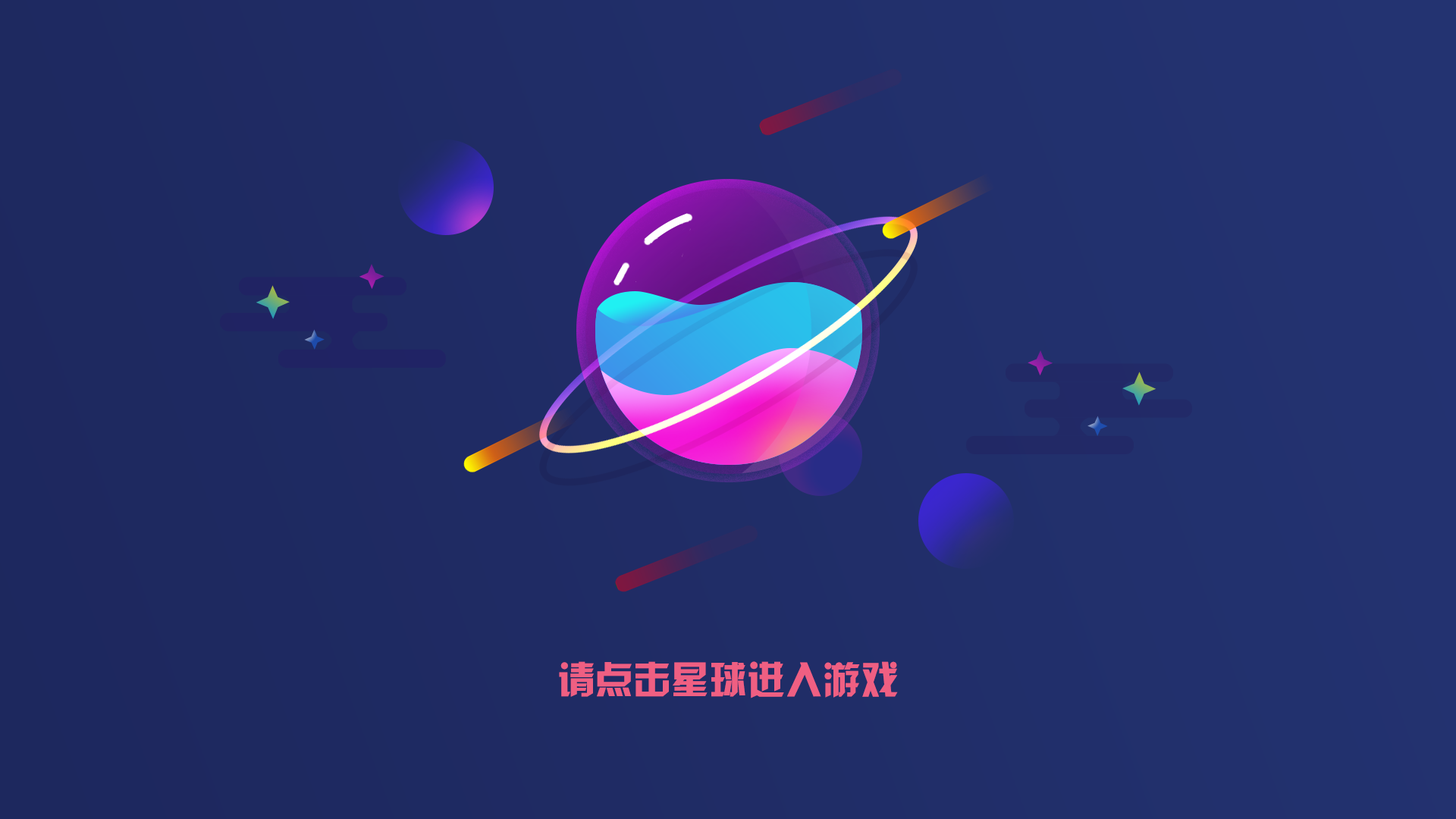
<style>
.page{position:relative;width:1456px;height:819px}
.page>*{position:absolute;margin:0}
.t1{font:37.9px "HYk2gj";color:#ef5f82}
</style>
<div class="page">
<p class="t1" style="left:559px;top:661px;width:339px;height:37px">请点击星球进入游戏</p>
</div>
